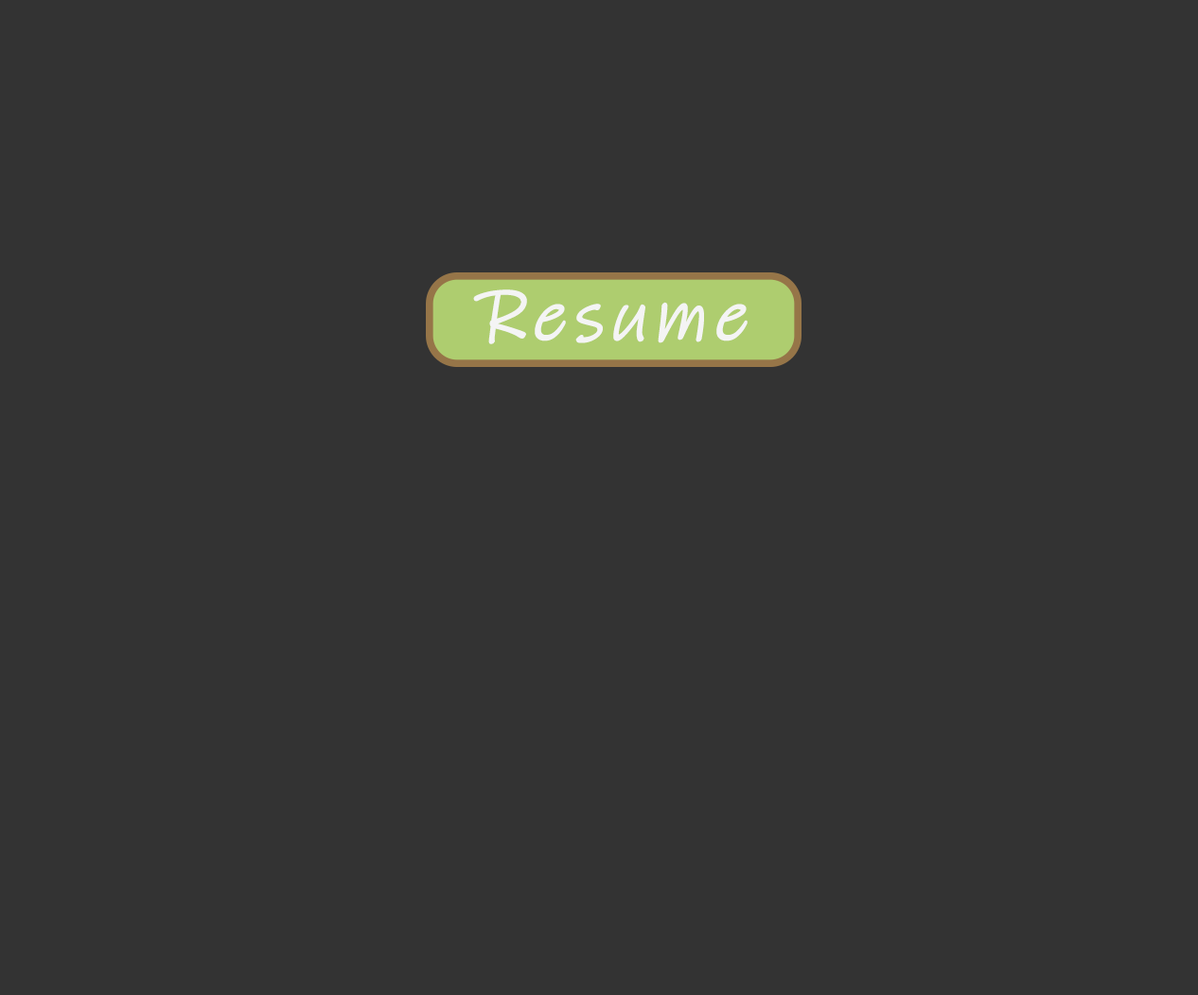
<style>
.page{position:relative;width:1198px;height:995px;background:#333333}
.page>*{position:absolute;margin:0}
.t1{font:70.6px "InkFree";letter-spacing:0.075em;color:#f4f4f4;font-weight:bold;font-style:italic}
</style>
<div class="page">
<p class="t1" style="left:473px;top:290px;width:275px;height:54px">Resume</p>
</div>
